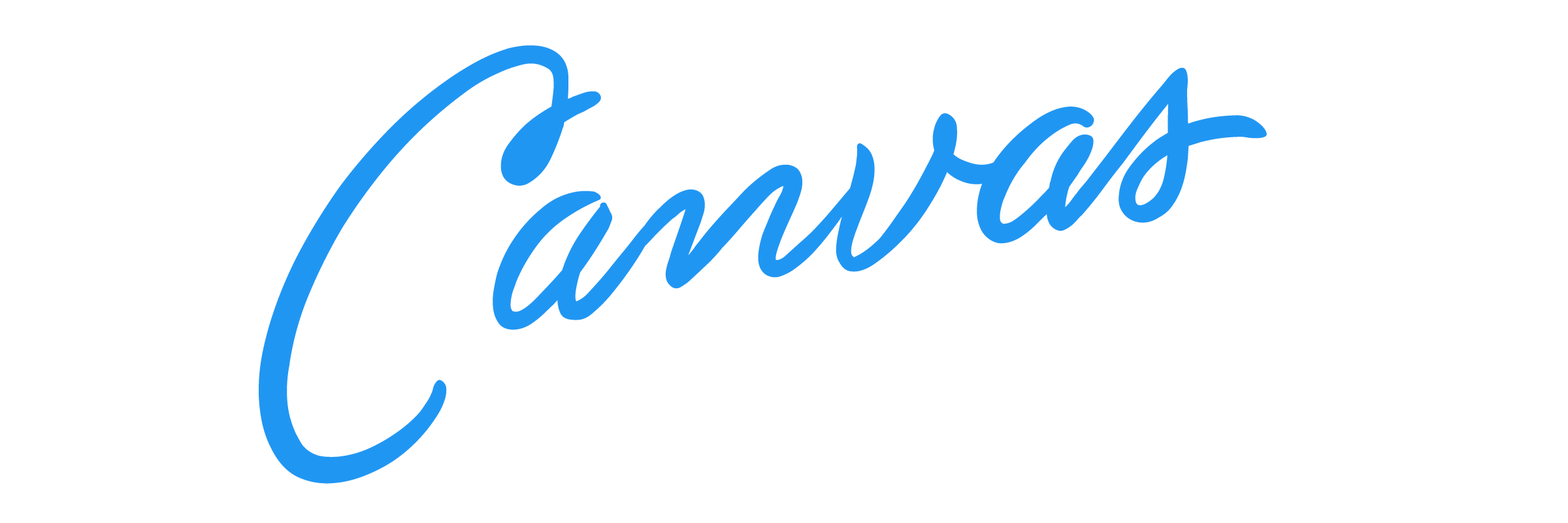
<style>
.page{position:relative;width:1568px;height:523px;background:#ffffff}
.page>*{position:absolute;margin:0}
.t1{font:544.4px "UnthriftFirstPersonal";color:#2096f3}
</style>
<div class="page">
<p class="t1" style="left:259px;top:45px;width:1008px;height:438px;rotate:-10deg">Canvas</p>
</div>
